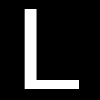
<style>
.page{position:relative;width:100px;height:100px;background:#000000}
.page>*{position:absolute;margin:0}
.t1{font:110.7px "ArialMT";color:#ffffff;scale:1.09 1}
</style>
<div class="page">
<p class="t1" style="left:24px;top:9px;width:55px;height:80px">L</p>
</div>
